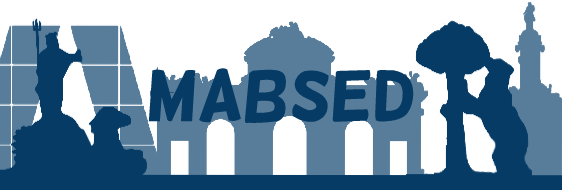
<style>
.page{position:relative;width:562px;height:190px;background:#ffffff}
.page>*{position:absolute;margin:0}
.t1{font:70px "Helsinki";color:#063b65}
</style>
<div class="page">
<p class="t1" style="left:148px;top:66px;width:266px;height:58px">MABSED</p>
</div>
